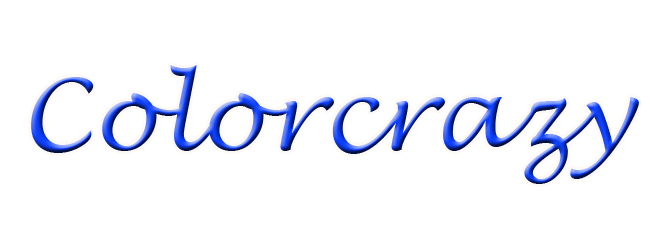
<style>
.page{position:relative;width:650px;height:250px;background:#ffffff}
.page>*{position:absolute;margin:0}
.t1{font:100px "LucidaHandwriting-Italic"}
</style>
<div class="page">
<p class="t1" style="left:31px;top:65px;width:608px;height:119px">Colorcrazy</p>
</div>
